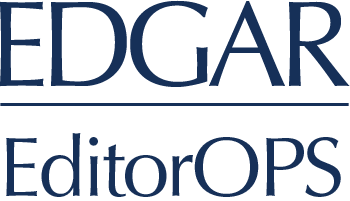
<style>
.page{position:relative;width:350px;height:201px;background:#ffffff}
.page>*{position:absolute;margin:0}
.t1{font:120px "OptimaLTStd";letter-spacing:-0.08em;color:#163058}
.t2{font:85px "OptimaLTStd";letter-spacing:-0.04em;color:#163058}
.t3{font:85px "OptimaLTStd";letter-spacing:-0.04em;color:#163058;text-transform:uppercase}
</style>
<div class="page">
<p class="t1" style="left:0px;top:0px;width:350px;height:87px">EDGAR</p>
<p class="t2" style="left:6px;top:133px;width:335px;height:64px">Editor<span class="t3">Ops</span></p>
</div>
